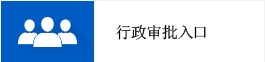
<style>
.page{position:relative;width:265px;height:62px;background:#ffffff}
.page>*{position:absolute;margin:0}
.t1{font:16px "SimSun";letter-spacing:0.05em;color:#000000}
</style>
<div class="page">
<p class="t1" style="left:116px;top:24px;width:90px;height:16px">行政审批入口</p>
</div>
